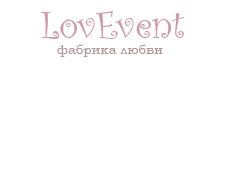
<style>
.page{position:relative;width:236px;height:177px;background:#ffffff}
.page>*{position:absolute;margin:0}
.t1{font:40px "CurlzMT";color:#cd9ba6}
.t2{font:13.3px "BookmanOldStyle";color:#b19a9c}
</style>
<div class="page">
<p class="t1" style="left:41px;top:11px;width:144px;height:28px">LovEvent</p>
<p class="t2" style="left:57px;top:44px;width:106px;height:13px">фабрика любви</p>
</div>
